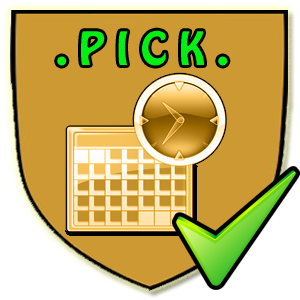
<style>
.page{position:relative;width:300px;height:300px;background:#cd9933}
.page>*{position:absolute;margin:0}
.t1{font:40.4px "HoboStd";color:#02f113}
</style>
<div class="page">
<p class="t1" style="left:57px;top:30px;width:171px;height:36px">. P I C K .</p>
</div>
